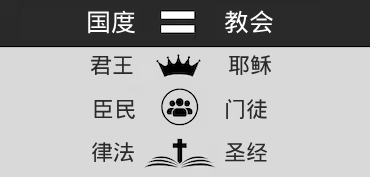
<style>
.page{position:relative;width:370px;height:177px;background:#d9d9d9}
.page>*{position:absolute;margin:0}
.t1{font:25px "DroidSansFallback";color:#fefefe}
.t2{font:22px "DroidSansFallback";color:#2a2a2a}
</style>
<div class="page">
<p class="t1" style="left:88px;top:10px;width:47px;height:24px">国度</p>
<p class="t1" style="left:224px;top:10px;width:49px;height:24px">教会</p>
<p class="t2" style="left:90px;top:55px;width:43px;height:20px">君王</p>
<p class="t2" style="left:228px;top:55px;width:44px;height:20px">耶稣</p>
<p class="t2" style="left:94px;top:99px;width:41px;height:20px">臣民</p>
<p class="t2" style="left:226px;top:98px;width:41px;height:22px">门徒</p>
<p class="t2" style="left:91px;top:142px;width:43px;height:20px">律法</p>
<p class="t2" style="left:225px;top:142px;width:43px;height:20px">圣经</p>
</div>
